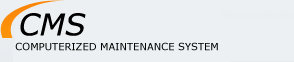
<style>
.page{position:relative;width:294px;height:62px;background:#ecf0f2}
.page>*{position:absolute;margin:0}
.t1{font:30px "Verdana-Italic";color:#000000}
.t2{font:10px "Verdana";color:#000000}
</style>
<div class="page">
<p class="t1" style="left:20px;top:13px;width:66px;height:23px">CMS</p>
<p class="t2" style="left:15px;top:42px;width:203px;height:9px">COMPUTERIZED MAINTENANCE SYSTEM</p>
</div>
